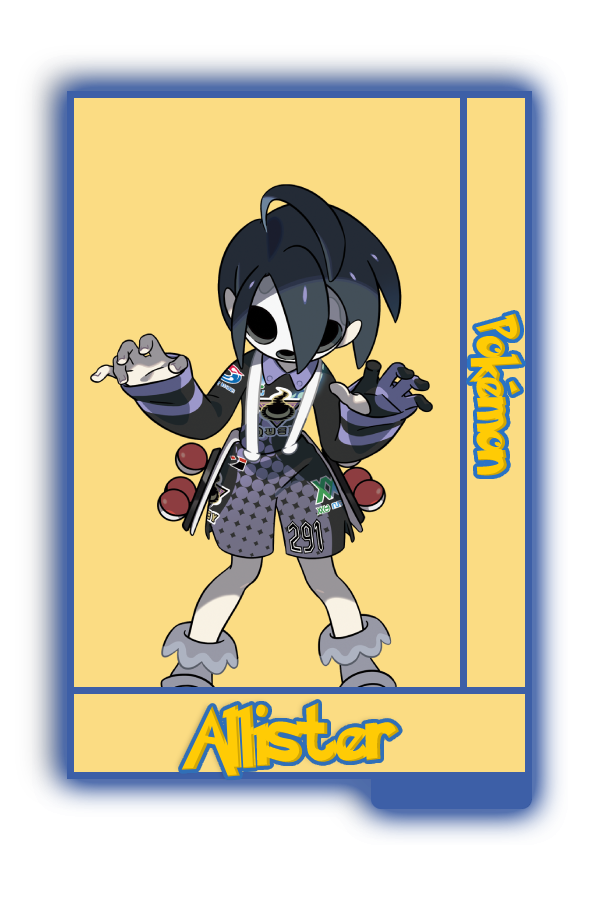
<style>
.page{position:relative;width:600px;height:900px;background:#fbdc83}
.page>*{position:absolute;margin:0}
.t1{font:48.8px "PokemonSolidNormal";color:#ffcb05;scale:0.8 1}
.t2{font:60.1px "PokemonSolidNormal";color:#ffcb05;scale:0.96 1}
</style>
<div class="page">
<p class="t1" style="left:469px;top:313px;width:54px;height:163px;rotate:90deg">Pokémon</p>
<p class="t2" style="left:181px;top:702px;width:218px;height:75px">Allister</p>
</div>
